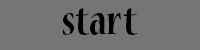
<style>
.page{position:relative;width:200px;height:50px;background:#757575}
.page>*{position:absolute;margin:0}
.t1{font:44px "NuevaStd-BoldCond";color:#000000}
</style>
<div class="page">
<p class="t1" style="left:62px;top:8px;width:76px;height:27px">start</p>
</div>
